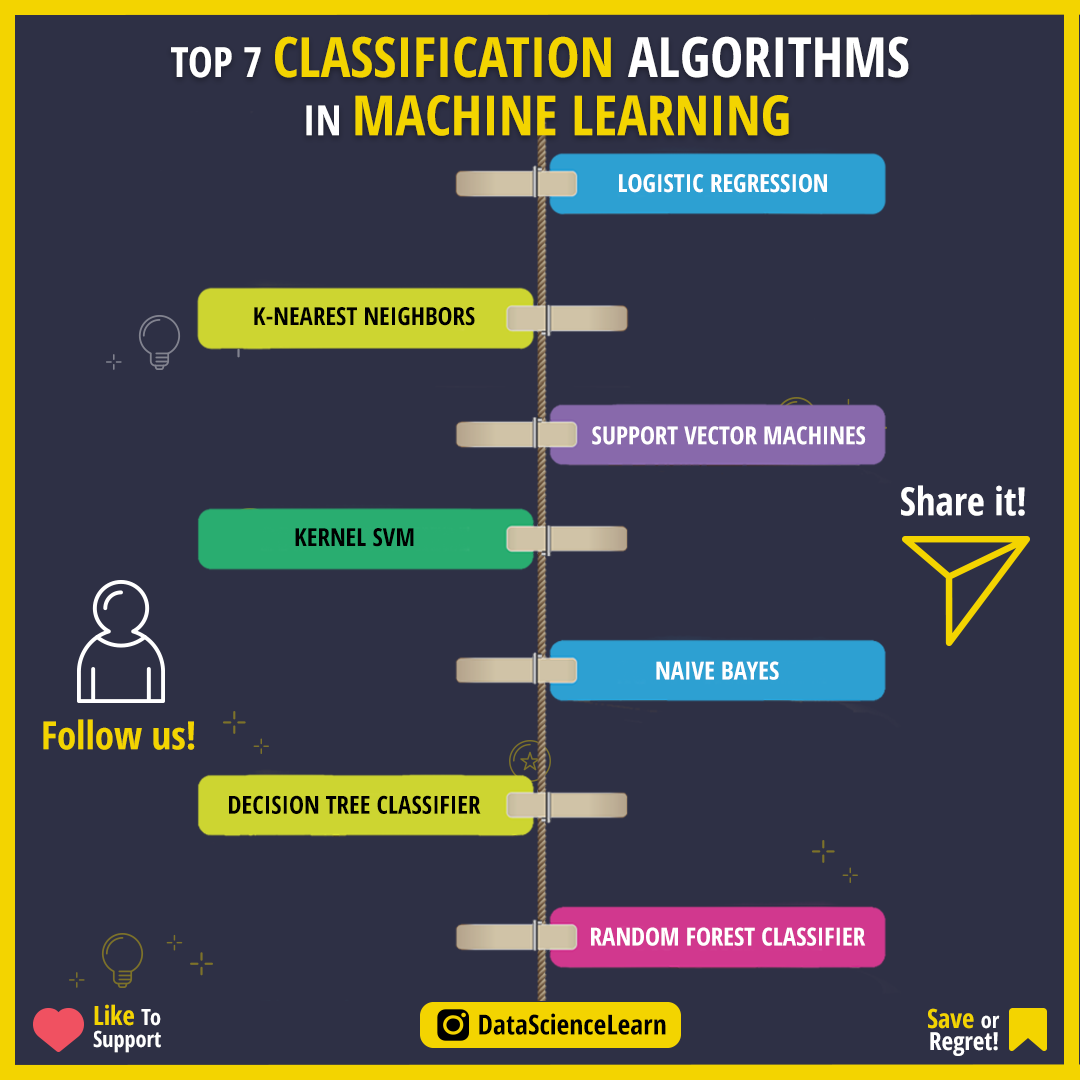
<style>
.page{position:relative;width:1080px;height:1080px;background:#2e3045}
.page>*{position:absolute;margin:0}
.t1{font:55.6px/58.3px "OpenSans-CondensedBold";color:#f3d400}
.t2{font:41.7px/58.3px "OpenSans-CondensedBold";color:#ffffff}
.t3{font:55.6px/58.3px "OpenSans-CondensedBold";color:#ffffff}
.t4{font:25px "OpenSans-CondensedBold";color:#ffffff}
.t5{font:25px "OpenSans-CondensedBold";color:#000000}
.t6{font:38.9px "OpenSans-CondensedBold";color:#ffffff}
.t7{font:38.9px "OpenSans-CondensedBold";color:#f3d400}
.t8{font:22.2px/22.2px "OpenSans-CondensedBold";color:#ffffff}
.t9{font:26.4px/22.2px "OpenSans-CondensedBold";color:#f3d400}
.t10{font:27.8px "OpenSans-CondensedBold";color:#000000}
.t11{font:25px/22.2px "OpenSans-CondensedBold";color:#ffffff}
</style>
<div class="page">
<p class="t1" style="left:171px;top:36px;width:738px;height:100px;text-align:center"><span class="t2">TOP 7 </span>CLASSIFICATION <span class="t3">ALGORITHMS <br></span><span class="t2">IN </span>MACHINE LEARNING</p>
<p class="t4" style="left:619px;top:174px;width:208px;height:19px">LOGISTIC REGRESSION</p>
<p class="t5" style="left:254px;top:307px;width:221px;height:19px">K-NEAREST NEIGHBORS</p>
<p class="t4" style="left:592px;top:426px;width:274px;height:19px">SUPPORT VECTOR MACHINES</p>
<p class="t6" style="left:901px;top:485px;width:124px;height:31px">Share it!</p>
<p class="t5" style="left:295px;top:528px;width:119px;height:19px">KERNEL SVM</p>
<p class="t4" style="left:656px;top:661px;width:123px;height:19px">NAIVE BAYES</p>
<p class="t7" style="left:43px;top:719px;width:152px;height:31px">Follow us!</p>
<p class="t5" style="left:229px;top:795px;width:252px;height:19px">DECISION TREE CLASSIFIER</p>
<p class="t4" style="left:591px;top:927px;width:275px;height:19px">RANDOM FOREST CLASSIFIER</p>
<p class="t8" style="left:93px;top:1004px;width:68px;height:49px"><span class="t9">Like </span>To<br>Support</p>
<p class="t10" style="left:479px;top:1013px;width:187px;height:22px">DataScienceLearn</p>
<p class="t11" style="left:928px;top:1008px;width:72px;height:48px;text-align:right"><span class="t9">Save </span><span class="t8">or<br></span>Regret!</p>
</div>
